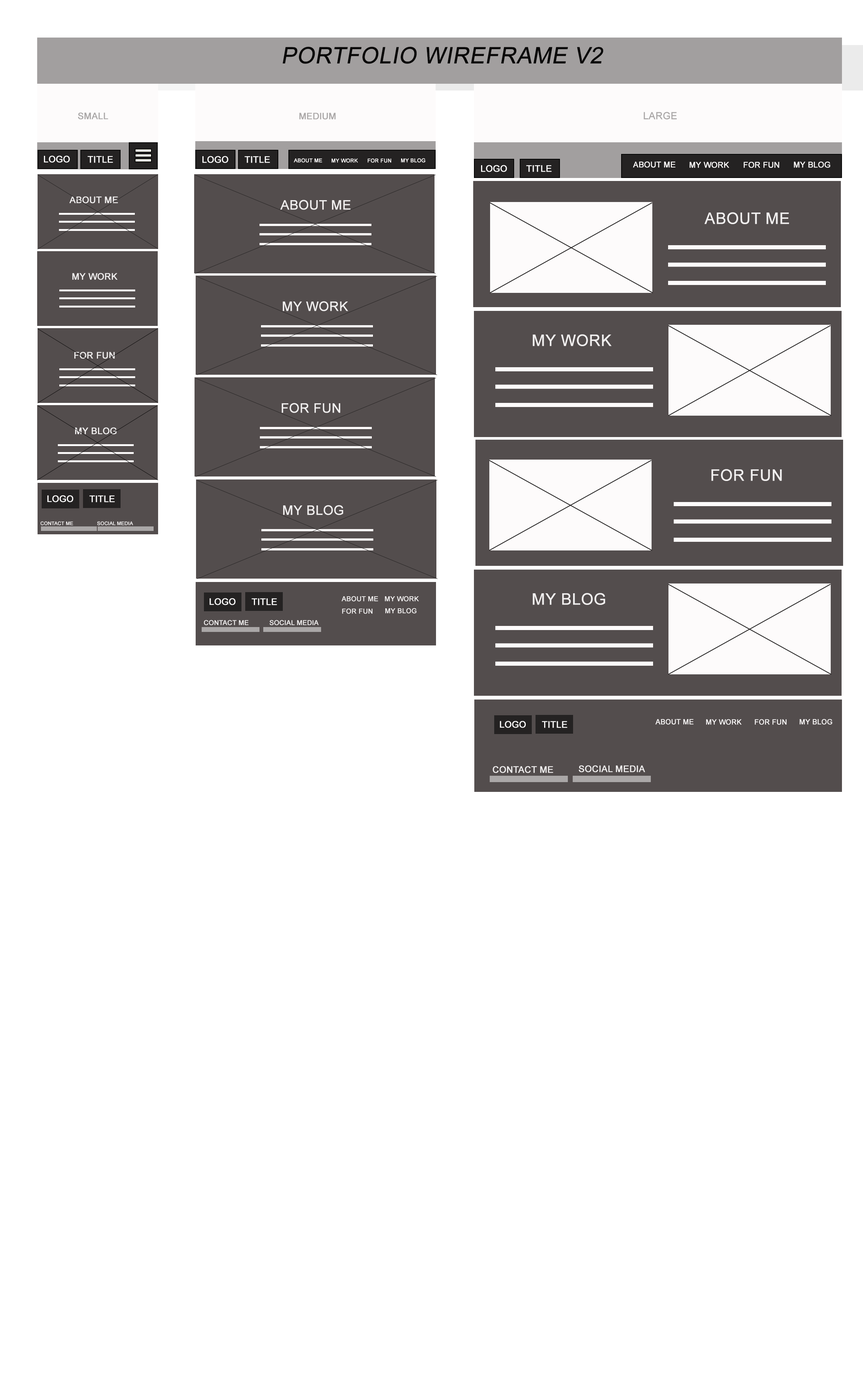
<style>
.page{position:relative;width:863px;height:1381px;background:#ffffff}
.page>*{position:absolute;margin:0}
.t1{font:22.5px "ArialMT";color:#090808;text-transform:uppercase;font-weight:bold;font-style:italic}
.t2{font:9px "ArialMT";color:#aaa7a7;text-transform:uppercase;font-weight:bold}
.t3{font:8.9px "ArialMT";color:#aaa7a7;text-transform:uppercase;font-weight:bold}
.t4{font:9.8px "ArialMT";color:#aaa7a7;text-transform:uppercase;font-weight:bold}
.t5{font:9px "ArialMT";color:#fdfcfc;text-transform:uppercase;font-weight:bold}
.t6{font:5.3px "ArialMT";color:#fdfbfb;font-weight:bold}
.t7{font:7.9px "ArialMT";color:#fdfbfb;font-weight:bold}
.t8{font:9px "ArialMT";color:#f1efef;text-transform:uppercase;font-weight:bold}
.t9{font:13.1px "ArialMT";color:#f1efef;text-transform:uppercase;font-weight:bold}
.t10{font:15.9px "ArialMT";color:#f1efef;text-transform:uppercase;font-weight:bold}
.t11{font:4.9px "ArialMT";color:#f1efef;text-transform:uppercase;font-weight:bold}
.t12{font:6.8px "ArialMT";color:#f1efef;text-transform:uppercase;font-weight:bold}
.t13{font:6.7px "ArialMT";color:#f1efef;text-transform:uppercase;font-weight:bold}
.t14{font:7.1px "ArialMT";color:#fdfbfb;font-weight:bold}
</style>
<div class="page">
<p class="t1" style="left:282px;top:47px;width:322px;height:17px">Portfolio Wireframe V2</p>
<p class="t2" style="left:78px;top:112px;width:30px;height:7px">small</p>
<p class="t3" style="left:299px;top:113px;width:37px;height:6px">Medium</p>
<p class="t4" style="left:644px;top:112px;width:33px;height:7px">large</p>
<p class="t5" style="left:44px;top:156px;width:26px;height:7px">Logo</p>
<p class="t5" style="left:88px;top:156px;width:25px;height:7px">title</p>
<p class="t5" style="left:202px;top:156px;width:26px;height:7px">Logo</p>
<p class="t5" style="left:245px;top:156px;width:25px;height:7px">title</p>
<p class="t6" style="left:294px;top:158px;width:28px;height:5px">ABOUT ME</p>
<p class="t6" style="left:332px;top:159px;width:26px;height:4px">MY WORK</p>
<p class="t6" style="left:368px;top:159px;width:23px;height:4px">FOR FUN</p>
<p class="t6" style="left:401px;top:158px;width:25px;height:5px">MY BLOG</p>
<p class="t7" style="left:633px;top:162px;width:43px;height:6px">ABOUT ME</p>
<p class="t7" style="left:690px;top:162px;width:39px;height:6px">MY WORK</p>
<p class="t7" style="left:744px;top:162px;width:35px;height:6px">FOR FUN</p>
<p class="t7" style="left:794px;top:162px;width:36px;height:6px">MY BLOG</p>
<p class="t5" style="left:481px;top:165px;width:26px;height:7px">Logo</p>
<p class="t5" style="left:526px;top:165px;width:26px;height:7px">title</p>
<p class="t8" style="left:69px;top:196px;width:49px;height:8px">about me</p>
<p class="t9" style="left:280px;top:200px;width:71px;height:10px">about me</p>
<p class="t10" style="left:705px;top:212px;width:84px;height:12px">About me</p>
<p class="t8" style="left:72px;top:273px;width:46px;height:7px">my work</p>
<p class="t9" style="left:283px;top:301px;width:65px;height:10px">my work</p>
<p class="t10" style="left:533px;top:334px;width:79px;height:12px">my work</p>
<p class="t8" style="left:74px;top:352px;width:41px;height:7px">for fun</p>
<p class="t9" style="left:282px;top:403px;width:58px;height:10px">for fun</p>
<p class="t8" style="left:75px;top:427px;width:42px;height:8px">my blog</p>
<p class="t10" style="left:711px;top:469px;width:71px;height:12px">for fun</p>
<p class="t5" style="left:47px;top:495px;width:26px;height:8px">logo</p>
<p class="t5" style="left:89px;top:495px;width:26px;height:8px">title</p>
<p class="t9" style="left:283px;top:505px;width:60px;height:10px">my blog</p>
<p class="t11" style="left:41px;top:521px;width:32px;height:4px">contact me</p>
<p class="t11" style="left:97px;top:521px;width:36px;height:4px">Social media</p>
<p class="t10" style="left:533px;top:593px;width:72px;height:12px">my blog</p>
<p class="t5" style="left:210px;top:598px;width:26px;height:7px">logo</p>
<p class="t5" style="left:252px;top:598px;width:25px;height:7px">title</p>
<p class="t12" style="left:341px;top:596px;width:37px;height:6px">about me</p>
<p class="t12" style="left:385px;top:596px;width:34px;height:6px">my work</p>
<p class="t12" style="left:342px;top:608px;width:31px;height:6px">for fun</p>
<p class="t12" style="left:385px;top:608px;width:32px;height:6px">my blog</p>
<p class="t13" style="left:204px;top:620px;width:45px;height:5px">contact me</p>
<p class="t13" style="left:270px;top:620px;width:49px;height:5px">Social media</p>
<p class="t5" style="left:500px;top:721px;width:26px;height:7px">logo</p>
<p class="t5" style="left:542px;top:721px;width:26px;height:7px">title</p>
<p class="t14" style="left:655px;top:719px;width:39px;height:6px">ABOUT ME</p>
<p class="t14" style="left:706px;top:719px;width:36px;height:6px">MY WORK</p>
<p class="t14" style="left:755px;top:719px;width:32px;height:6px">FOR FUN</p>
<p class="t14" style="left:800px;top:719px;width:32px;height:6px">MY BLOG</p>
<p class="t8" style="left:493px;top:766px;width:60px;height:7px">contact me</p>
<p class="t8" style="left:579px;top:765px;width:66px;height:8px">Social media</p>
</div>
